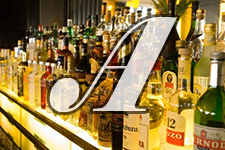
<style>
.page{position:relative;width:225px;height:150px}
.page>*{position:absolute;margin:0}
.t1{font:128.2px "Elephant-Italic";color:#dfd6cd;font-style:italic;scale:0.84 1}
</style>
<div class="page">
<p class="t1" style="left:49px;top:17px;width:128px;height:95px">A</p>
</div>
